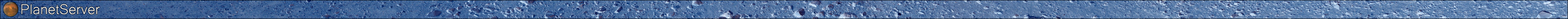
<style>
.page{position:relative;width:1568px;height:19px}
.page>*{position:absolute;margin:0}
.t1{font:18.3px "Microsoft-Yi-Baiti";color:#ffffff}
</style>
<div class="page">
<p class="t1" style="left:21px;top:4px;width:79px;height:11px">PlanetServer</p>
</div>
